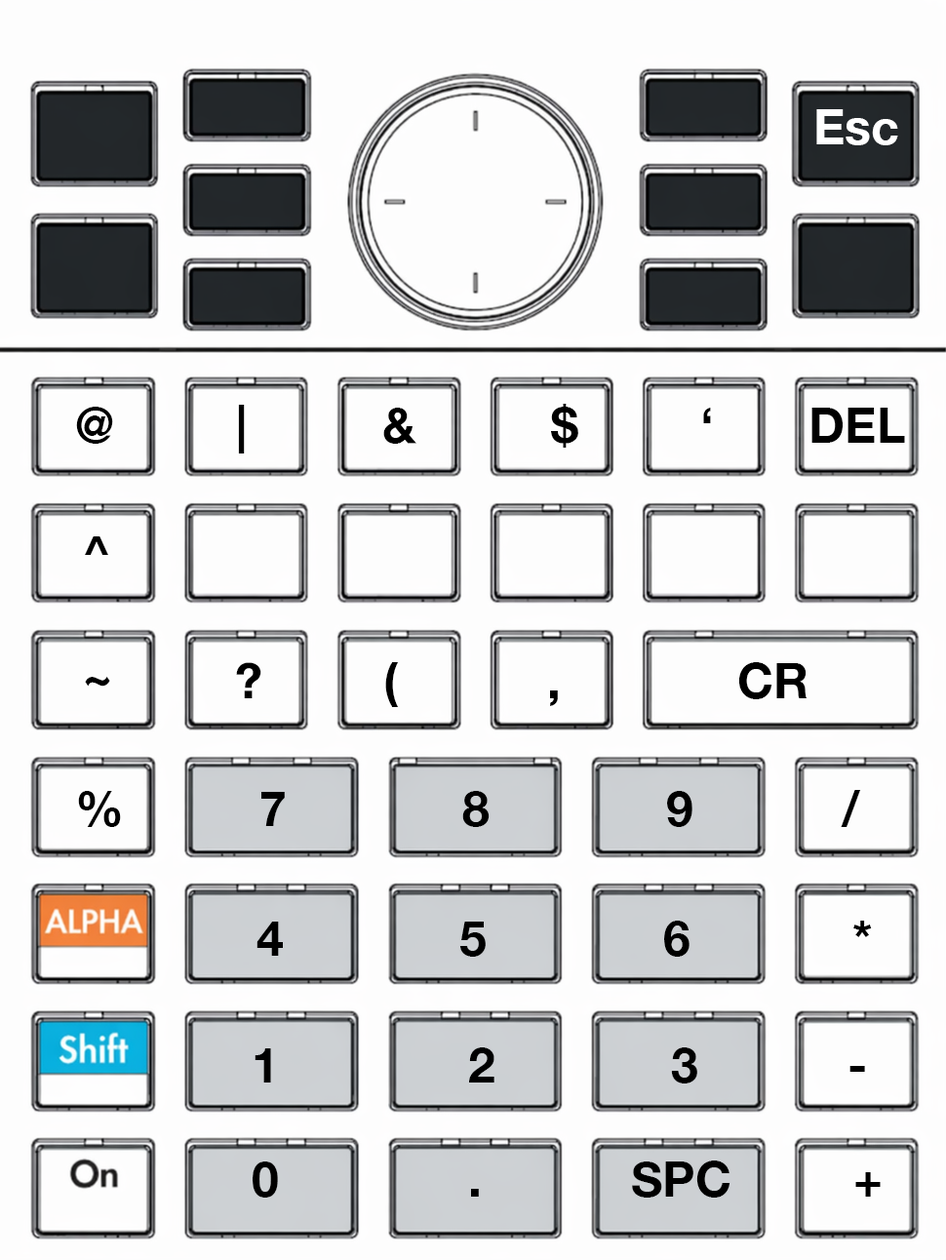
<style>
.page{position:relative;width:946px;height:1260px;background:#fdfdfd}
.page>*{position:absolute;margin:0}
.t1{font:48.8px "HelveticaNeue-Bold";color:#ffffff}
.t2{font:48.8px "HelveticaNeue-Bold";color:#000000}
</style>
<div class="page">
<p class="t1" style="left:816px;top:109px;width:82px;height:36px">Esc</p>
<p class="t2" style="left:76px;top:404px;width:829px;height:50px">@         |          &amp;          $         ‘       DEL</p>
<p class="t2" style="left:85px;top:536px;width:23px;height:19px">^</p>
<p class="t2" style="left:85px;top:662px;width:723px;height:45px">~         ?         (           ,             CR</p>
<p class="t2" style="left:78px;top:790px;width:783px;height:37px">%          7             8             9           /</p>
<p class="t2" style="left:257px;top:921px;width:615px;height:36px">4             5             6            *</p>
<p class="t2" style="left:255px;top:1048px;width:610px;height:36px">1              2             3           -</p>
<p class="t2" style="left:253px;top:1161px;width:628px;height:37px">0              .           SPC         +</p>
</div>
